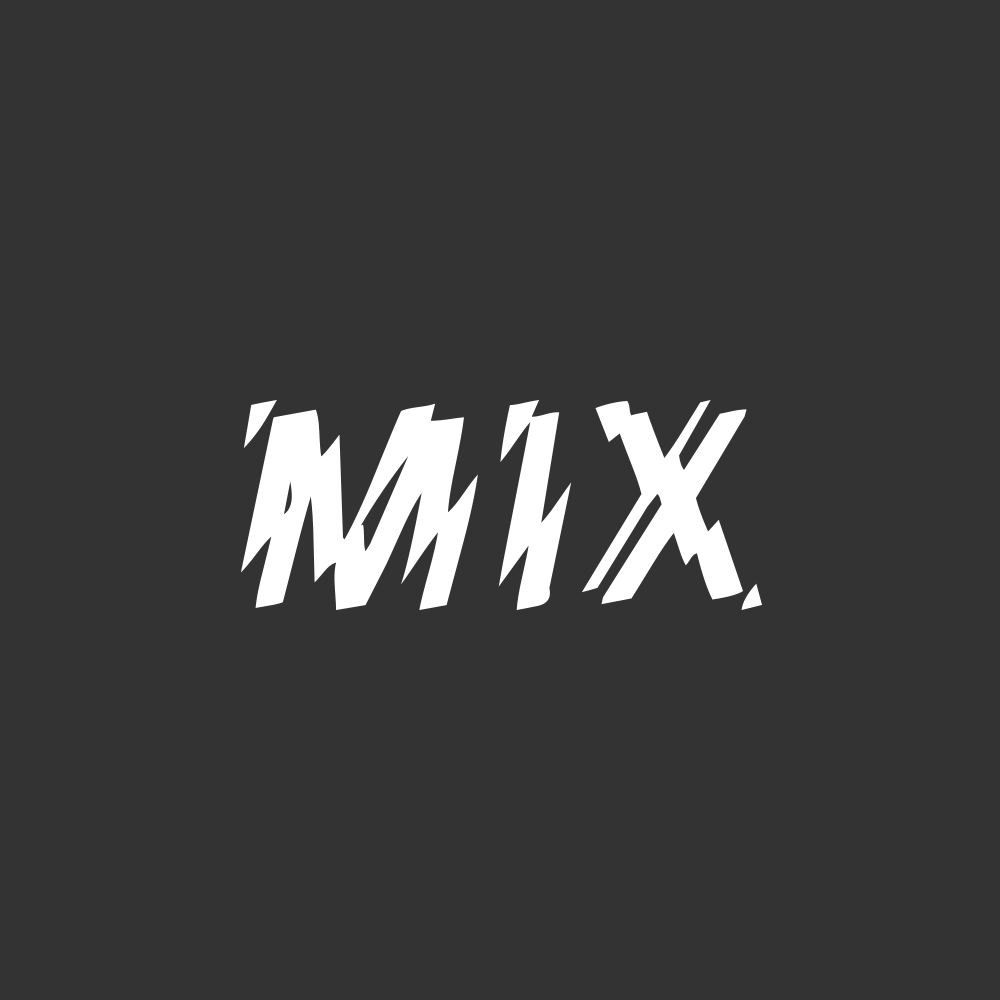
<style>
.page{position:relative;width:1000px;height:1000px;background:#333333}
.page>*{position:absolute;margin:0}
.t1{font:271.9px "BlurNormal";color:#ffffff}
</style>
<div class="page">
<p class="t1" style="left:240px;top:400px;width:522px;height:210px">MIX</p>
</div>
